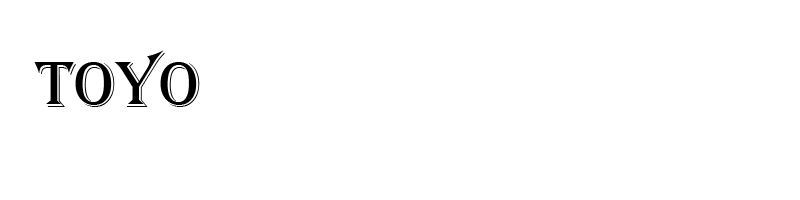
<style>
.page{position:relative;width:800px;height:200px;background:#ffffff}
.page>*{position:absolute;margin:0}
.t1{font:66.7px "Algerian";color:#000000}
</style>
<div class="page">
<p class="t1" style="left:34px;top:50px;width:166px;height:57px">TOYO</p>
</div>
